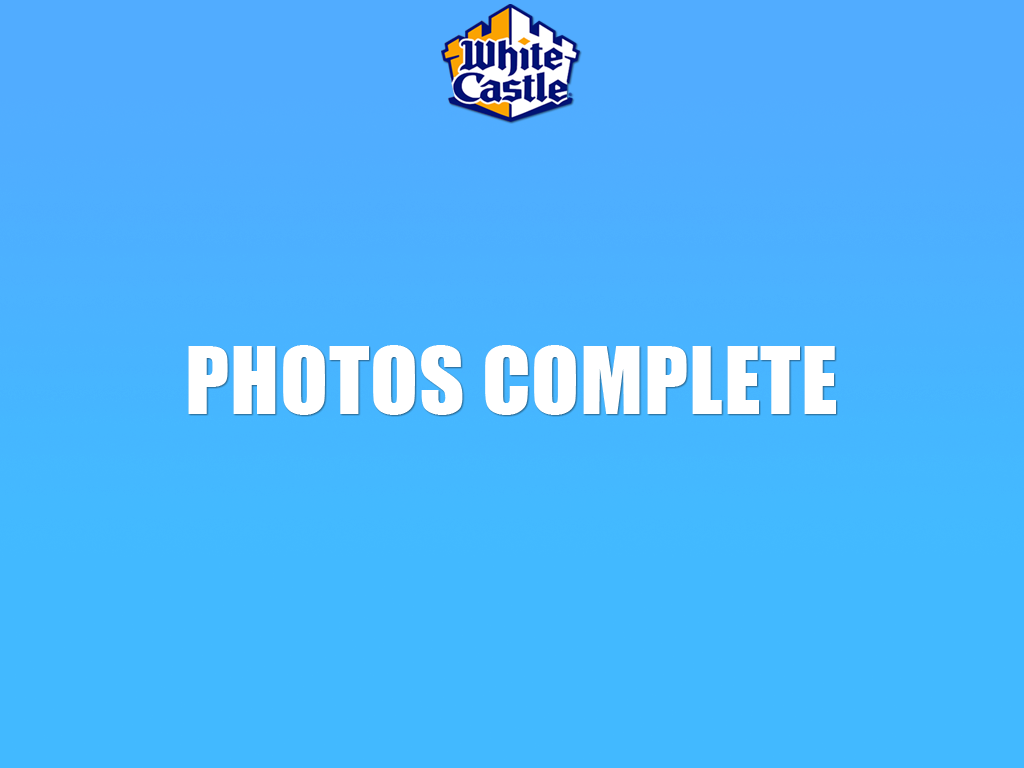
<style>
.page{position:relative;width:1024px;height:768px;background:#42b9ff}
.page>*{position:absolute;margin:0}
.t1{font:86.1px "Impact";letter-spacing:0.01em;color:#ffffff;font-variant:small-caps}
</style>
<div class="page">
<p class="t1" style="left:188px;top:345px;width:648px;height:70px">PHOTOS COMPLETE</p>
</div>
